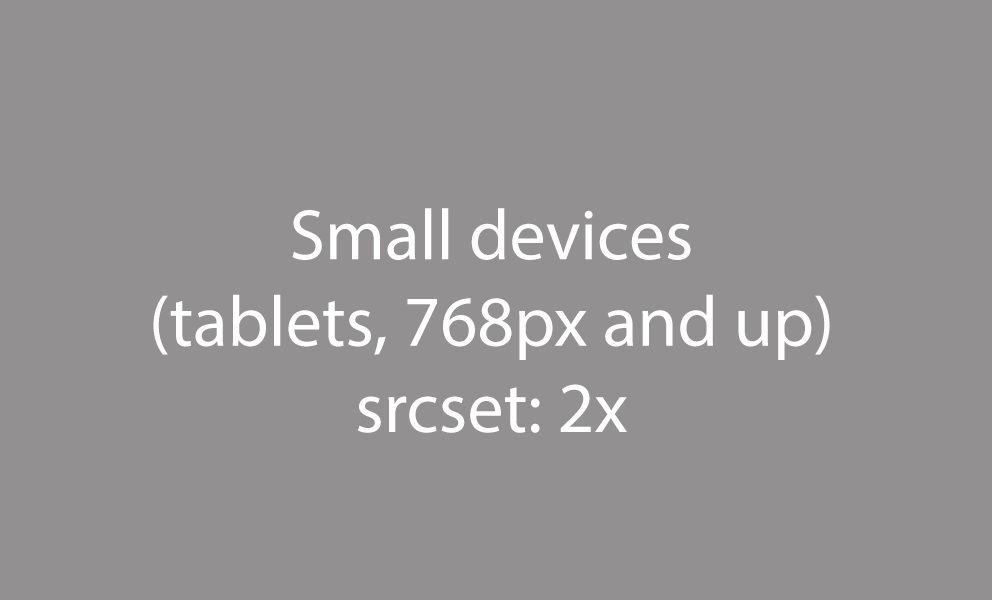
<style>
.page{position:relative;width:992px;height:600px;background:#929090}
.page>*{position:absolute;margin:0}
.t1{font:72px "MyriadPro-Regular";color:#ffffff}
</style>
<div class="page">
<p class="t1" style="left:153px;top:208px;width:677px;height:225px;text-align:center">Small devices <br>(tablets, 768px and up)<br>srcset: 2x</p>
</div>
